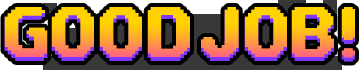
<style>
.page{position:relative;width:359px;height:70px;background:#000000}
.page>*{position:absolute;margin:0}
.t1{font:60px "DNFBitBitv2";text-transform:uppercase}
</style>
<div class="page">
<p class="t1" style="left:4px;top:7px;width:351px;height:55px">Good job!</p>
</div>
